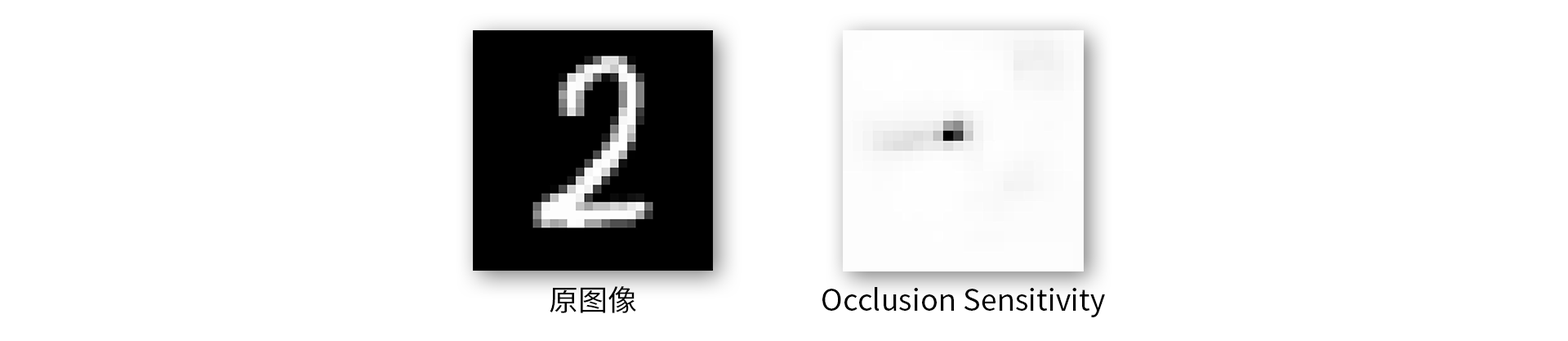
<style>
.page{position:relative;width:1568px;height:341px;background:#ffffff}
.page>*{position:absolute;margin:0}
.t1{font:29.4px "SourceHanSansCN-Regular";color:#000000}
</style>
<div class="page">
<p class="t1" style="left:550px;top:286px;width:86px;height:27px">原图像</p>
<p class="t1" style="left:822px;top:287px;width:283px;height:30px">Occlusion Sensitivity</p>
</div>
